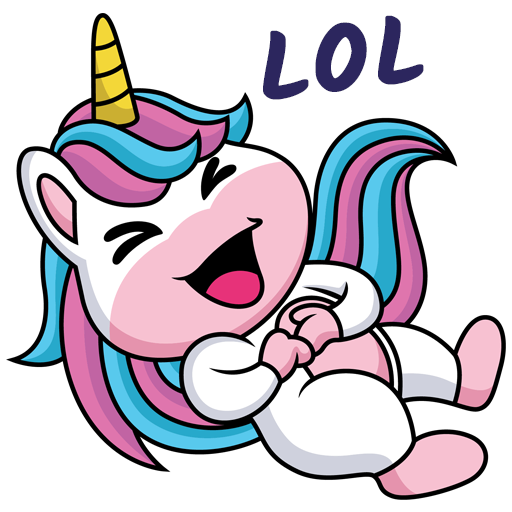
<style>
.page{position:relative;width:512px;height:512px;background:#ffffff}
.page>*{position:absolute;margin:0}
.t1{font:100px "Kalam-Bold";letter-spacing:0.025em;color:#2c265e;font-weight:bold}
</style>
<div class="page">
<p class="t1" style="left:263px;top:15px;width:161px;height:85px;rotate:-7deg">LOL</p>
</div>
